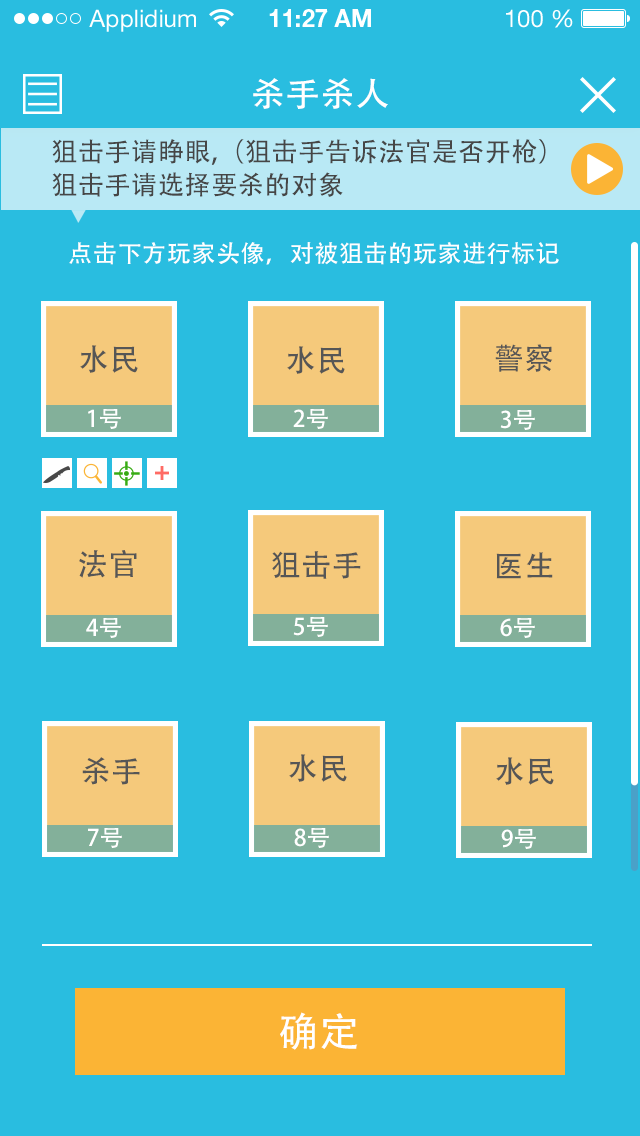
<style>
.page{position:relative;width:640px;height:1136px;background:#29bde0}
.page>*{position:absolute;margin:0}
.t1{font:34px "AdobeHeitiStd-Regular";letter-spacing:0.025em;color:#ffffff}
.t2{font:26px/33.4px "AdobeHeitiStd-Regular";letter-spacing:0.025em;color:#464646}
.t3{font:24px "AdobeHeitiStd-Regular";letter-spacing:0.025em;color:#ffffff}
.t4{font:30px "AdobeHeitiStd-Regular";letter-spacing:0.025em;color:#565656}
.t5{font:22.8px "AdobeHeitiStd-Regular";letter-spacing:0.025em;color:#ffffff}
.t6{font:40px "AdobeHeitiStd-Regular";letter-spacing:0.025em;color:#ffffff}
</style>
<div class="page">
<p class="t1" style="left:253px;top:78px;width:135px;height:31px">杀手杀人</p>
<p class="t2" style="left:52px;top:139px;width:494px;height:58px">狙击手请睁眼,（狙击手告诉法官是否开枪）<br>狙击手请选择要杀的对象</p>
<p class="t3" style="left:69px;top:242px;width:490px;height:23px">点击下方玩家头像，对被狙击的玩家进行标记</p>
<p class="t4" style="left:80px;top:345px;width:58px;height:28px">水民</p>
<p class="t4" style="left:287px;top:346px;width:58px;height:28px">水民</p>
<p class="t4" style="left:495px;top:344px;width:58px;height:28px">警察</p>
<p class="t5" style="left:88px;top:409px;width:33px;height:20px">1号</p>
<p class="t5" style="left:293px;top:409px;width:35px;height:20px">2号</p>
<p class="t5" style="left:500px;top:410px;width:35px;height:20px">3号</p>
<p class="t4" style="left:79px;top:550px;width:58px;height:28px">法官</p>
<p class="t4" style="left:272px;top:551px;width:89px;height:28px">狙击手</p>
<p class="t4" style="left:496px;top:552px;width:57px;height:27px">医生</p>
<p class="t5" style="left:293px;top:617px;width:35px;height:20px">5号</p>
<p class="t5" style="left:86px;top:618px;width:35px;height:20px">4号</p>
<p class="t5" style="left:500px;top:618px;width:35px;height:20px">6号</p>
<p class="t4" style="left:82px;top:757px;width:58px;height:28px">杀手</p>
<p class="t4" style="left:289px;top:754px;width:58px;height:28px">水民</p>
<p class="t4" style="left:496px;top:757px;width:58px;height:28px">水民</p>
<p class="t5" style="left:88px;top:828px;width:34px;height:20px">7号</p>
<p class="t5" style="left:294px;top:828px;width:35px;height:20px">8号</p>
<p class="t5" style="left:501px;top:829px;width:35px;height:20px">9号</p>
<p class="t6" style="left:280px;top:1012px;width:78px;height:38px">确定</p>
</div>
